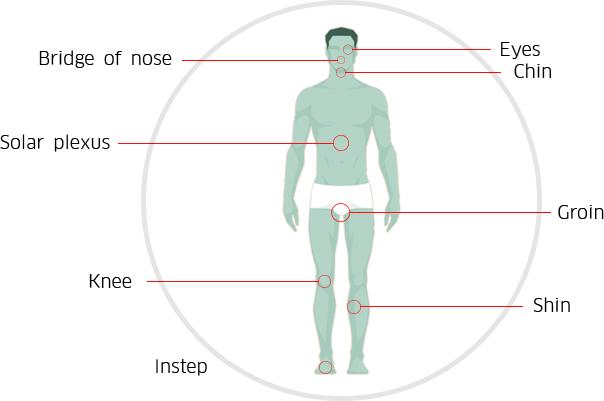
<style>
.page{position:relative;width:604px;height:401px;background:#ffffff}
.page>*{position:absolute;margin:0}
.t1{font:18px "ClanPro-Book";color:#000000}
</style>
<div class="page">
<p class="t1" style="left:39px;top:50px;width:133px;height:18px">Bridge of nose</p>
<p class="t1" style="left:501px;top:42px;width:39px;height:17px">Eyes</p>
<p class="t1" style="left:514px;top:63px;width:37px;height:15px">Chin</p>
<p class="t1" style="left:0px;top:134px;width:110px;height:18px">Solar plexus</p>
<p class="t1" style="left:558px;top:205px;width:46px;height:14px">Groin</p>
<p class="t1" style="left:89px;top:274px;width:43px;height:14px">Knee</p>
<p class="t1" style="left:533px;top:297px;width:37px;height:15px">Shin</p>
<p class="t1" style="left:156px;top:359px;width:51px;height:17px">Instep</p>
</div>
